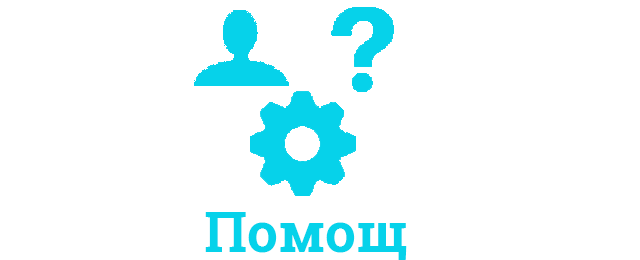
<style>
.page{position:relative;width:640px;height:260px;background:#ffffff}
.page>*{position:absolute;margin:0}
.t1{font:55px "RobotoSlab-Bold";color:#06d2ea}
</style>
<div class="page">
<p class="t1" style="left:205px;top:212px;width:202px;height:49px">Помощ</p>
</div>
